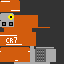
<style>
.page{position:relative;width:64px;height:64px;background:#333333}
.page>*{position:absolute;margin:0}
.t1{font:6.7px "LucidaConsole";color:#ffffff}
</style>
<div class="page">
<p class="t1" style="left:6px;top:37px;width:11px;height:6px">CR7</p>
</div>
